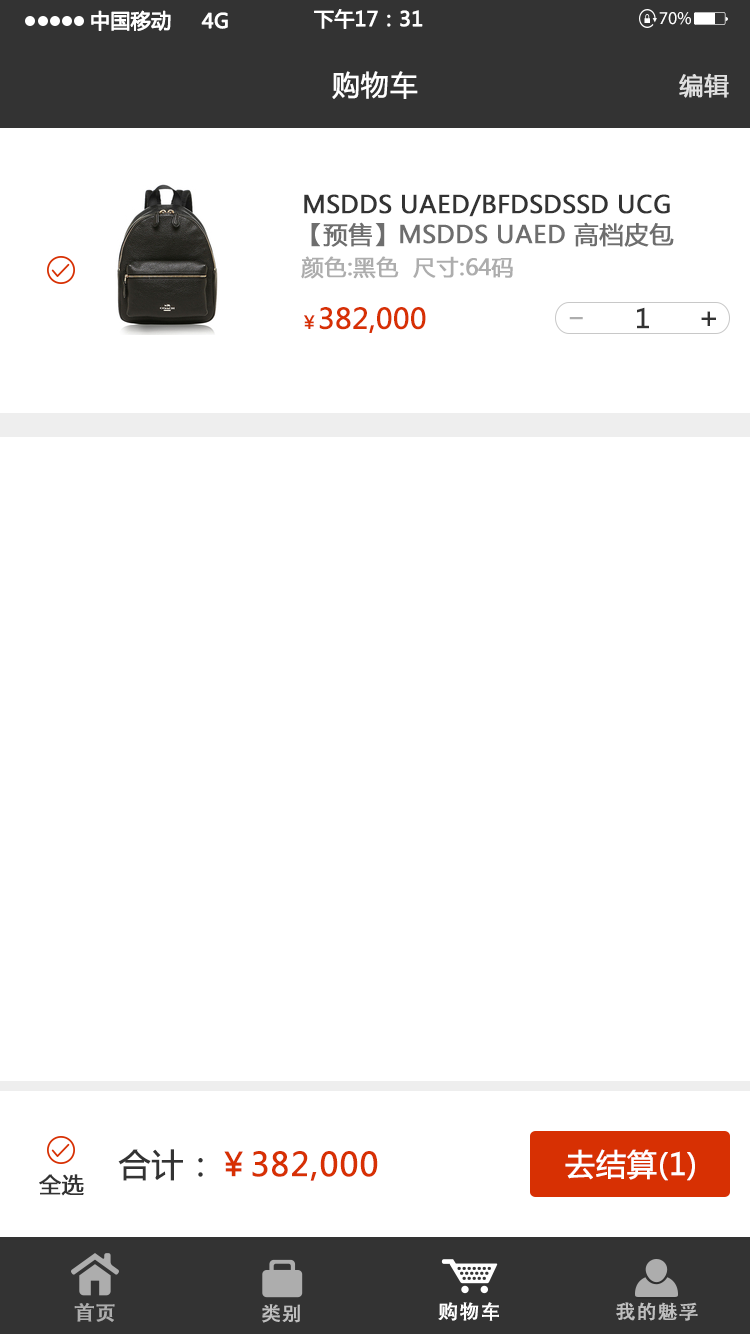
<style>
.page{position:relative;width:750px;height:1334px;background:#ffffff}
.page>*{position:absolute;margin:0}
.t1{font:20px "MicrosoftYaHei";color:#ffffff;font-weight:bold}
.t2{font:19.8px "MicrosoftYaHei";color:#ffffff;font-weight:bold}
.t3{font:18px "MyriadPro-Regular";color:#ffffff}
.t4{font:28px "MicrosoftYaHei";color:#ffffff;font-weight:bold}
.t5{font:24px "MicrosoftYaHei";color:#e0e0e0;font-weight:bold}
.t6{font:24px "MicrosoftYaHei";color:#333333;font-weight:bold}
.t7{font:24px "MicrosoftYaHei";color:#6e6e6e;font-weight:bold}
.t8{font:22px "MicrosoftYaHei";color:#adadad;font-weight:bold}
.t9{font:28px "MicrosoftYaHei";color:#d73003;font-weight:bold}
.t10{font:18px "MicrosoftYaHei";color:#d73003;font-weight:bold}
.t11{font:28px "MicrosoftYaHei";color:#adadad;font-weight:bold}
.t12{font:26px "MicrosoftYaHei";color:#333333;font-weight:bold}
.t13{font:28px "MicrosoftYaHei";color:#333333;font-weight:bold}
.t14{font:32px "MicrosoftYaHei";color:#d73003;font-weight:bold}
.t15{font:32px "MicrosoftYaHei";color:#333333;font-weight:bold}
.t16{font:30px "MicrosoftYaHei";color:#ffffff;font-weight:bold}
.t17{font:22px "MicrosoftYaHei";color:#333333;font-weight:bold}
.t18{font:19.5px "AdobeHeitiStd-Regular";color:#ffffff;font-weight:bold}
.t19{font:19.5px "AdobeHeitiStd-Regular";color:#bfbfbf;font-weight:bold}
.t20{font:20px "AdobeHeitiStd-Regular";color:#adadad;font-weight:bold;scale:1.04 1}
</style>
<div class="page">
<p class="t1" style="left:91px;top:10px;width:80px;height:21px">中国移动</p>
<p class="t2" style="left:201px;top:12px;width:27px;height:17px">4G</p>
<p class="t2" style="left:314px;top:9px;width:109px;height:20px">下午17：31</p>
<p class="t3" style="left:659px;top:12px;width:32px;height:13px">70 %</p>
<p class="t4" style="left:332px;top:71px;width:86px;height:28px">购物车</p>
<p class="t5" style="left:679px;top:73px;width:50px;height:25px">编辑</p>
<p class="t6" style="left:304px;top:194px;width:366px;height:23px">MSDDS UAED/BFDSDSSD UCG</p>
<p class="t7" style="left:311px;top:222px;width:363px;height:25px">【预售】MSDDS UAED 高档皮包</p>
<p class="t8" style="left:301px;top:256px;width:212px;height:23px">颜色:黑色  尺寸:64码</p>
<p class="t9" style="left:304px;top:307px;width:122px;height:26px"><span class="t10">￥</span>382,000</p>
<p class="t11" style="left:569px;top:317px;width:14px;height:3px">_</p>
<p class="t12" style="left:637px;top:307px;width:12px;height:22px">1</p>
<p class="t13" style="left:701px;top:311px;width:15px;height:15px">+</p>
<p class="t14" style="left:118px;top:1149px;width:260px;height:32px"><span class="t15">合计：</span>￥382,000</p>
<p class="t16" style="left:565px;top:1149px;width:130px;height:32px">去结算(1)</p>
<p class="t17" style="left:39px;top:1174px;width:45px;height:22px">全选</p>
<p class="t18" style="left:438px;top:1302px;width:61px;height:19px">购物车</p>
<p class="t19" style="left:616px;top:1302px;width:82px;height:19px">我的魅孚</p>
<p class="t20" style="left:74px;top:1303px;width:41px;height:19px">首页</p>
<p class="t19" style="left:262px;top:1304px;width:38px;height:19px">类别</p>
</div>
